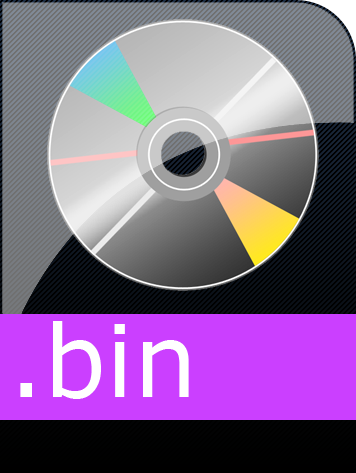
<style>
.page{position:relative;width:356px;height:473px;background:#cb3fff}
.page>*{position:absolute;margin:0}
.t1{font:100px "Verdana";color:#ffffff}
</style>
<div class="page">
<p class="t1" style="left:20px;top:321px;width:169px;height:78px">.bin</p>
</div>
